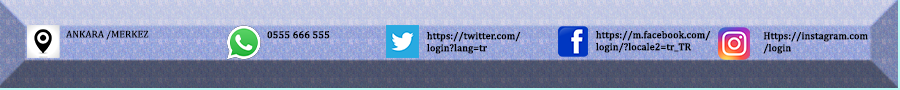
<style>
.page{position:relative;width:900px;height:90px}
.page>*{position:absolute;margin:0}
.t1{font:10px "Cambria";color:#000000;text-transform:uppercase}
.t2{font:10px "Cambria";color:#000000;font-weight:bold}
</style>
<div class="page">
<p class="t1" style="left:66px;top:30px;width:83px;height:10px">ankara /merkez</p>
<p class="t2" style="left:596px;top:30px;width:115px;height:23px">https://m.facebook.com/<br>login/?locale2=tr_TR</p>
<p class="t2" style="left:267px;top:31px;width:63px;height:8px">0555 666 555</p>
<p class="t2" style="left:427px;top:32px;width:94px;height:22px">https://twitter.com/<br>login?lang=tr</p>
<p class="t2" style="left:763px;top:32px;width:105px;height:22px">Https://instagram.com<br>/login</p>
</div>
